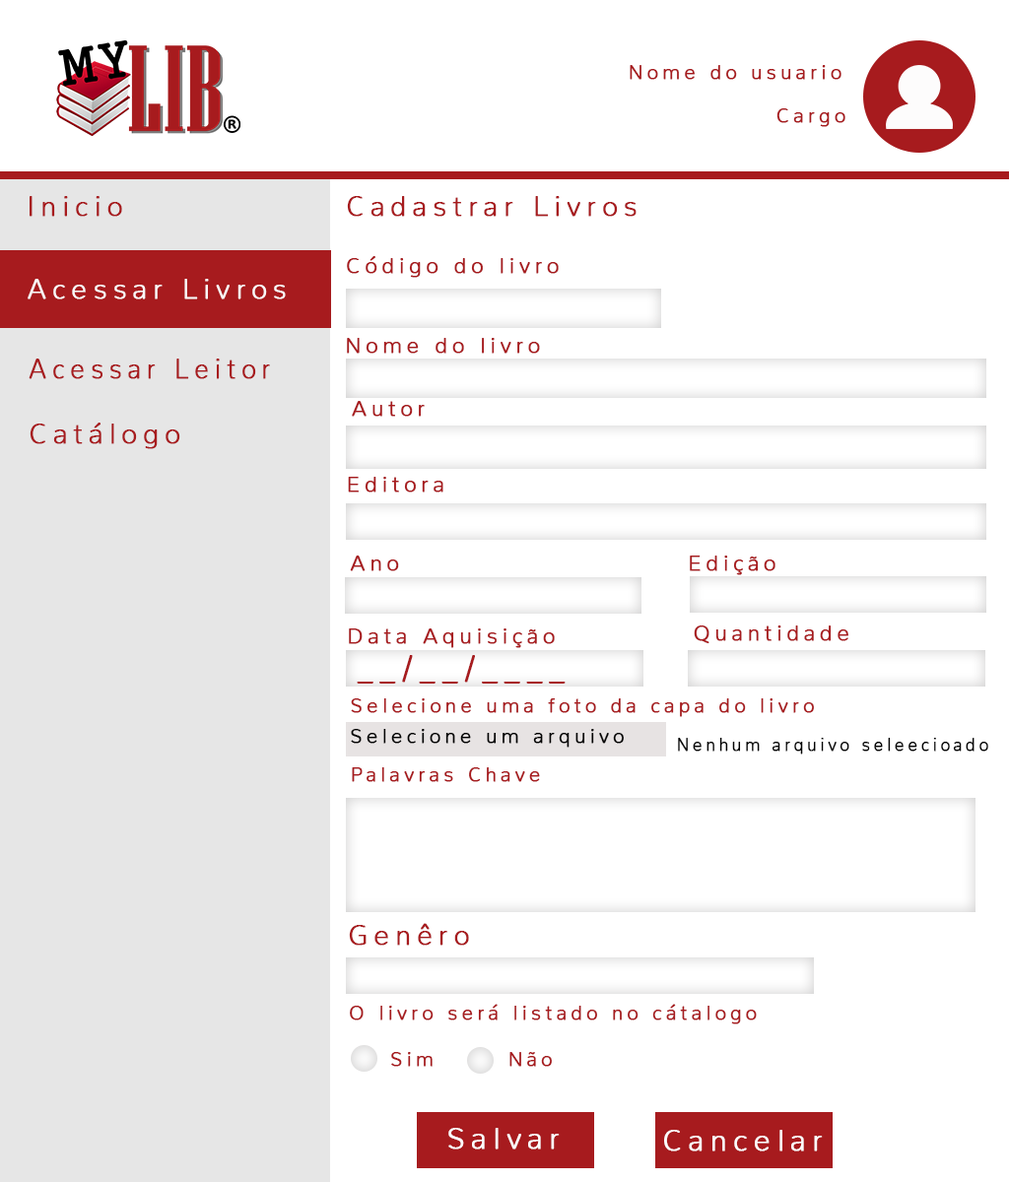
<style>
.page{position:relative;width:1009px;height:1182px;background:#ffffff}
.page>*{position:absolute;margin:0}
.t1{font:19.7px "Nunito-ExtraLight";letter-spacing:0.2em;color:#a71b1e;font-weight:bold}
.t2{font:27.6px "Nunito-ExtraLight";letter-spacing:0.2em;color:#a71b1e;font-weight:bold}
.t3{font:21.7px "Nunito-ExtraLight";letter-spacing:0.2em;color:#a71b1e;font-weight:bold}
.t4{font:27.6px "Nunito-ExtraLight";letter-spacing:0.2em;color:#fbf9f9;font-weight:bold}
.t5{font:27.6px "Nunito-ExtraLight";letter-spacing:0.2em;color:#a71b1e;font-weight:bold;scale:0.94 1}
.t6{font:33.9px "Nunito-ExtraLight";letter-spacing:0.2em;color:#a71b1e;font-weight:bold;scale:0.9 1}
.t7{font:19.7px "Nunito-ExtraLight";letter-spacing:0.2em;color:#030303;font-weight:bold}
.t8{font:16.7px "Nunito-ExtraLight";letter-spacing:0.2em;color:#040404;font-weight:bold}
.t9{font:29.6px "Nunito-ExtraLight";letter-spacing:0.2em;color:#fdfdfd;font-weight:bold}
</style>
<div class="page">
<p class="t1" style="left:629px;top:65px;width:212px;height:15px">Nome do usuario</p>
<p class="t1" style="left:776px;top:108px;width:69px;height:19px">Cargo</p>
<p class="t2" style="left:30px;top:196px;width:92px;height:21px">Inicio</p>
<p class="t2" style="left:347px;top:196px;width:289px;height:21px">Cadastrar Livros</p>
<p class="t3" style="left:347px;top:256px;width:212px;height:22px">Código do livro</p>
<p class="t4" style="left:28px;top:279px;width:258px;height:20px">Acessar Livros</p>
<p class="t3" style="left:347px;top:338px;width:193px;height:16px">Nome do livro</p>
<p class="t5" style="left:29px;top:359px;width:241px;height:20px">Acessar Leitor</p>
<p class="t3" style="left:352px;top:401px;width:73px;height:16px">Autor</p>
<p class="t2" style="left:30px;top:423px;width:150px;height:26px">Catálogo</p>
<p class="t3" style="left:348px;top:477px;width:95px;height:16px">Editora</p>
<p class="t3" style="left:350px;top:556px;width:49px;height:15px">Ano</p>
<p class="t3" style="left:690px;top:556px;width:85px;height:19px">Edição</p>
<p class="t3" style="left:349px;top:628px;width:206px;height:20px">Data Aquisição</p>
<p class="t3" style="left:694px;top:626px;width:154px;height:17px">Quantidade</p>
<p class="t6" style="left:357px;top:655px;width:208px;height:29px">__/__/____</p>
<p class="t1" style="left:351px;top:698px;width:463px;height:19px">Selecione uma foto da capa do livro</p>
<p class="t7" style="left:351px;top:729px;width:273px;height:19px">Selecione um arquivo</p>
<p class="t8" style="left:678px;top:738px;width:310px;height:17px">Nenhum arquivo seleecioado</p>
<p class="t1" style="left:352px;top:767px;width:188px;height:15px">Palavras Chave</p>
<p class="t2" style="left:349px;top:923px;width:120px;height:23px">Genêro</p>
<p class="t1" style="left:350px;top:1004px;width:407px;height:20px">O livro será listado no cátalogo</p>
<p class="t1" style="left:391px;top:1052px;width:41px;height:15px">Sim</p>
<p class="t1" style="left:509px;top:1052px;width:43px;height:15px">Não</p>
<p class="t9" style="left:448px;top:1128px;width:112px;height:22px">Salvar</p>
<p class="t9" style="left:664px;top:1130px;width:159px;height:22px">Cancelar</p>
</div>
